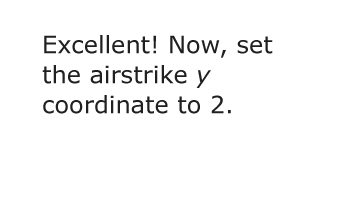
<style>
.page{position:relative;width:340px;height:222px;background:#ffffff}
.page>*{position:absolute;margin:0}
.t1{font:24px/30px "Verdana";color:#202020}
.t2{font:24px/30px "Verdana-Italic";color:#202020}
</style>
<div class="page">
<p class="t1" style="left:42px;top:35px;width:231px;height:79px">Excellent! Now, set the airstrike <span class="t2">y</span><br>coordinate to 2.</p>
</div>
